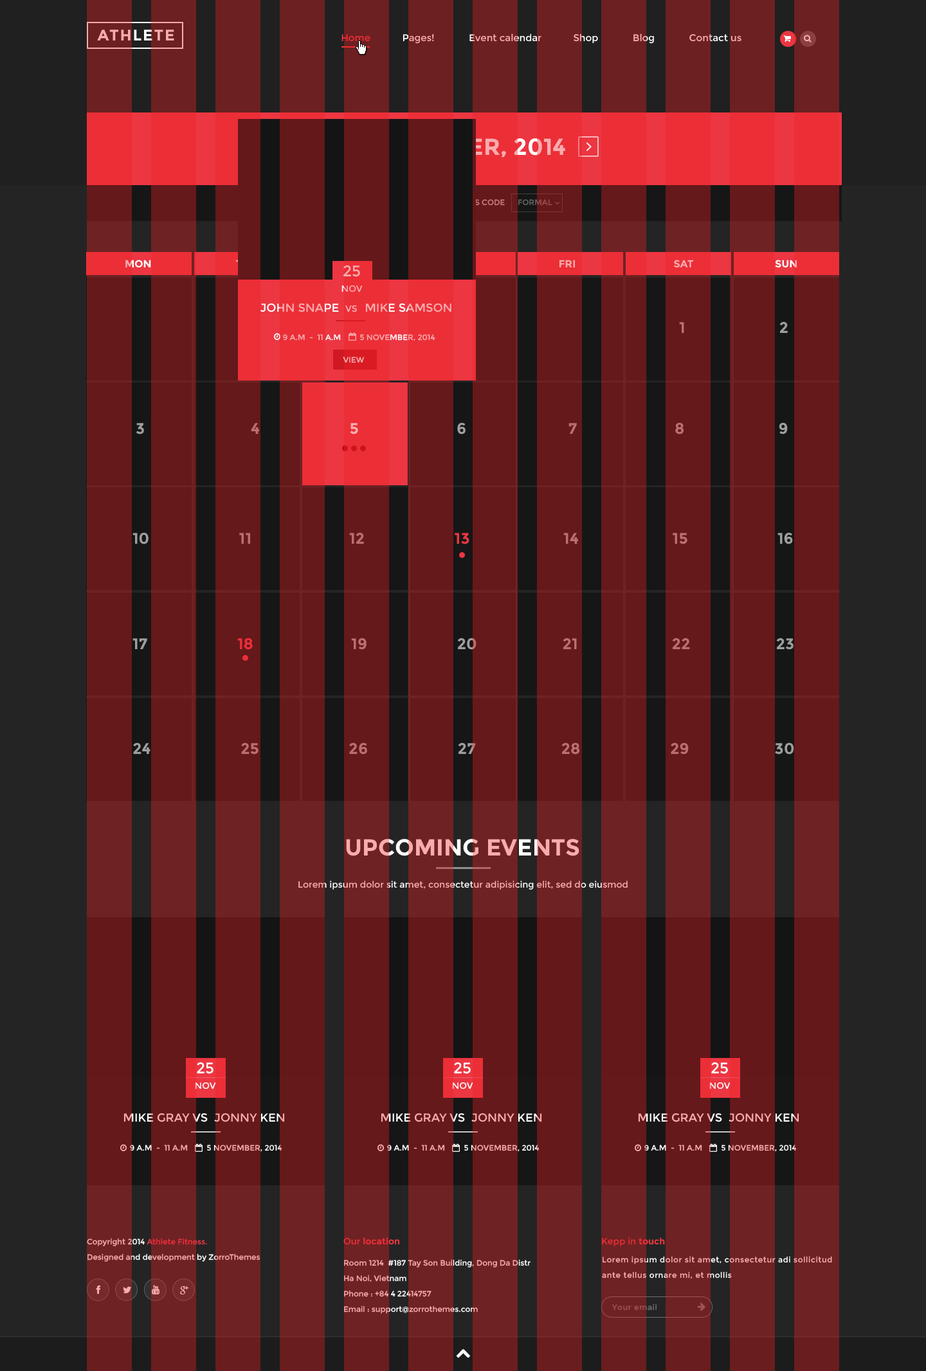
<style>
.page{position:relative;width:926px;height:1371px;background:#65191b}
.page>*{position:absolute;margin:0}
.t1{font:15.4px "Montserrat-Bold";letter-spacing:0.075em;color:#f8acae;text-transform:uppercase}
.t2{font:9.6px "Montserrat-Regular"}
.t3{font:23.1px "Montserrat-Bold";text-transform:uppercase}
.t4{font:7.7px "Montserrat-Regular";text-transform:uppercase}
.t5{font:10.3px "Montserrat-Bold";text-transform:uppercase}
.t6{font:9px/15.4px "Montserrat-Regular";color:#f8acae;text-transform:uppercase}
.t7{font:15.4px/15.4px "Montserrat-Regular";color:#f8acae;text-transform:uppercase}
.t8{font:11.6px "Montserrat-Regular";text-transform:uppercase}
.t9{font:9px "Montserrat-Regular";text-transform:uppercase}
.t10{font:15.4px "Montserrat-Bold";color:#9e9e9e;text-transform:uppercase}
.t11{font:7.7px "Montserrat-Regular";color:#f8acae;text-transform:uppercase}
.t12{font:15.4px "Montserrat-Bold";text-transform:uppercase}
.t13{font:23.1px "Montserrat-Bold";color:#f8acae;text-transform:uppercase}
.t14{font:9px "Montserrat-Regular"}
.t15{font:9px/15.4px "Montserrat-Regular";color:#ffffff;text-transform:uppercase}
.t16{font:15.4px/15.4px "Montserrat-Regular";color:#ffffff;text-transform:uppercase}
.t17{font:7.7px/15.4px "Montserrat-Regular"}
.t18{font:9px "Montserrat-Bold";color:#ec3642}
.t19{font:9px "Montserrat-Regular";color:#ec3642}
.t20{font:7.7px/15.4px "Montserrat-Regular";color:#f8acae}
.t21{font:7.7px/15.4px "Montserrat-Regular";letter-spacing:0.05em;color:#f8acae}
.t22{font:7.7px "Montserrat-Regular";letter-spacing:0.05em;color:#9f5355}
</style>
<div class="page">
<p class="t1" style="left:97px;top:30px;width:77px;height:10px">Athlete</p>
<p class="t2" style="left:341px;top:33px;width:400px;height:11px">Home            Pages!             Event calendar            Shop             Blog             Contact us</p>
<p class="t3" style="left:363px;top:138px;width:202px;height:20px">november, 2014</p>
<p class="t4" style="left:351px;top:199px;width:201px;height:7px">Shot by       title               Dress Code      formal</p>
<p class="t5" style="left:125px;top:260px;width:672px;height:8px">mon                               tue                               wed                                thu                               fri                                    sat                              sun</p>
<p class="t6" style="left:341px;top:265px;width:22px;height:27px;text-align:center"><span class="t7">25<br></span>nov</p>
<p class="t8" style="left:260px;top:303px;width:191px;height:9px">John Snape  <span class="t9">vs   </span>mike samson</p>
<p class="t10" style="left:679px;top:321px;width:109px;height:12px">1                       2</p>
<p class="t11" style="left:283px;top:334px;width:152px;height:7px">9 a.m  -  11 a.m         5 november, 2014</p>
<p class="t11" style="left:343px;top:357px;width:21px;height:6px">view</p>
<p class="t12" style="left:136px;top:422px;width:652px;height:13px">3                          4                      5                        6                         7                        8                       9</p>
<p class="t12" style="left:132px;top:532px;width:661px;height:12px">10                      11                        12                      13                       14                       15                      16</p>
<p class="t12" style="left:132px;top:638px;width:661px;height:12px">17                      18                        19                      20                     21                       22                     23</p>
<p class="t12" style="left:133px;top:742px;width:661px;height:13px">24                      25                      26                      27                     28                      29                     30</p>
<p class="t13" style="left:346px;top:839px;width:233px;height:17px">upcoming events</p>
<p class="t14" style="left:298px;top:881px;width:329px;height:9px">Lorem ipsum dolor sit amet, consectetur adipisicing elit, sed do eiusmod</p>
<p class="t15" style="left:195px;top:1062px;width:21px;height:27px;text-align:center"><span class="t16">25<br></span>nov</p>
<p class="t15" style="left:452px;top:1062px;width:21px;height:27px;text-align:center"><span class="t16">25<br></span>nov</p>
<p class="t15" style="left:709px;top:1062px;width:21px;height:27px;text-align:center"><span class="t16">25<br></span>nov</p>
<p class="t8" style="left:123px;top:1113px;width:162px;height:9px">mike gray vs  jonny ken</p>
<p class="t8" style="left:381px;top:1113px;width:161px;height:9px">mike gray vs  jonny ken</p>
<p class="t8" style="left:638px;top:1113px;width:161px;height:9px">mike gray vs  jonny ken</p>
<p class="t4" style="left:130px;top:1145px;width:152px;height:7px">9 a.m  -  11 a.m         5 november, 2014</p>
<p class="t4" style="left:387px;top:1145px;width:152px;height:7px">9 a.m  -  11 a.m         5 november, 2014</p>
<p class="t4" style="left:644px;top:1145px;width:153px;height:7px">9 a.m  -  11 a.m         5 november, 2014</p>
<p class="t17" style="left:87px;top:1238px;width:173px;height:24px">Copyright 2014 Athlete Fitness. <br>Designed and development by ZorroThemes</p>
<p class="t18" style="left:343px;top:1238px;width:57px;height:7px"><span class="t19">Our </span>location</p>
<p class="t19" style="left:602px;top:1238px;width:63px;height:8px">Kepp in <span class="t18">touch</span></p>
<p class="t20" style="left:344px;top:1259px;width:186px;height:55px">Room 1214  #187 Tay Son Building, Dong Da Distr<br>Ha Noi, Vietnam<br>Phone : +84 4 22414757<br>Email : support@zorrothemes.com</p>
<p class="t21" style="left:602px;top:1256px;width:230px;height:23px">Lorem ipsum dolor sit amet, consectetur adi sollicitud ante tellus ornare mi, et mollis</p>
<p class="t22" style="left:611px;top:1304px;width:45px;height:7px">Your email</p>
</div>
